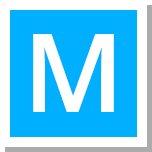
<style>
.page{position:relative;width:152px;height:152px;background:#00b0ff}
.page>*{position:absolute;margin:0}
.t1{font:109.3px "OpenSans-Semibold";color:#ffffff}
</style>
<div class="page">
<p class="t1" style="left:33px;top:34px;width:81px;height:78px">M</p>
</div>
